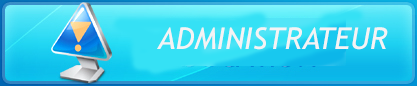
<style>
.page{position:relative;width:417px;height:86px}
.page>*{position:absolute;margin:0}
.t1{font:30px "TrebuchetMS-Italic";color:#f5f3f4}
</style>
<div class="page">
<p class="t1" style="left:157px;top:27px;width:231px;height:23px">ADMINISTRATEUR</p>
</div>
